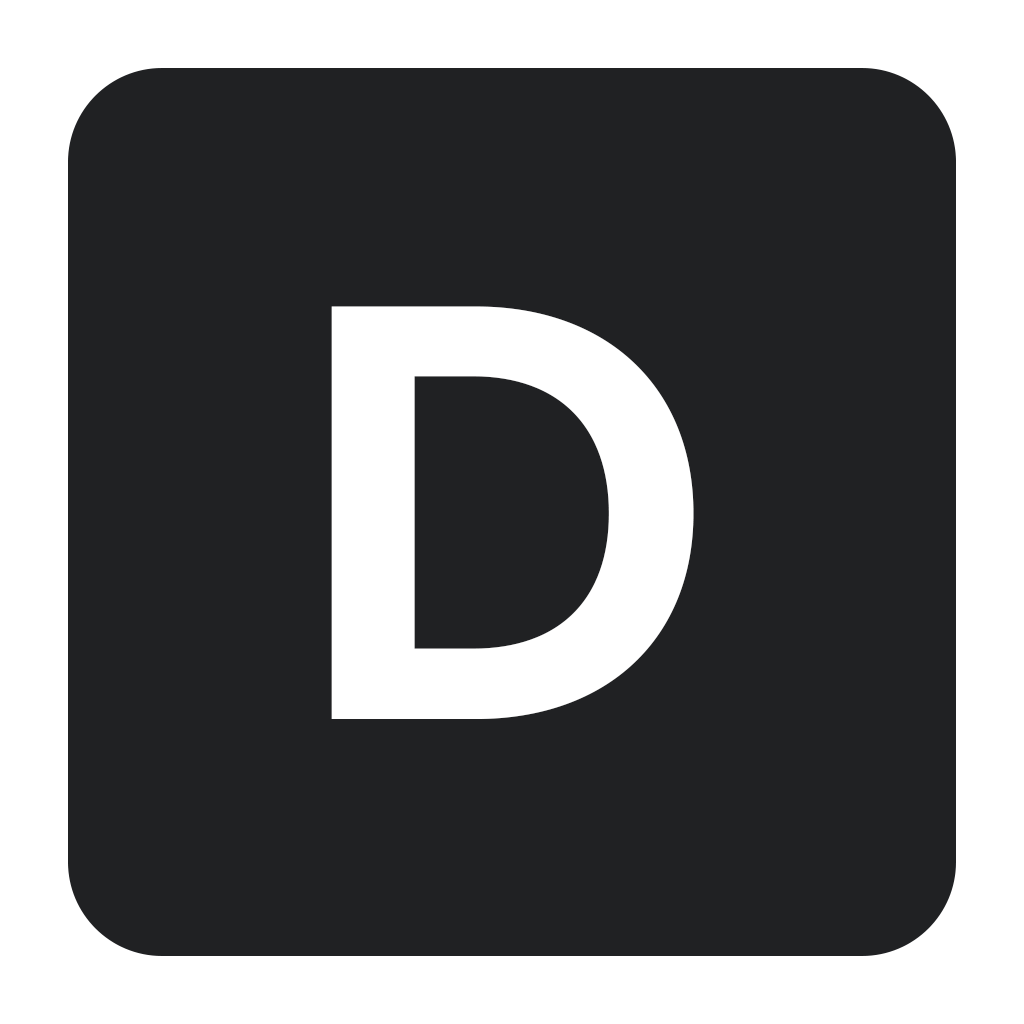
<style>
.page{position:relative;width:1024px;height:1024px;background:#202123}
.page>*{position:absolute;margin:0}
.t1{font:590.9px "Poppins-SemiBold";letter-spacing:-0.025em;color:#ffffff}
</style>
<div class="page">
<p class="t1" style="left:331px;top:306px;width:363px;height:413px">D</p>
</div>
